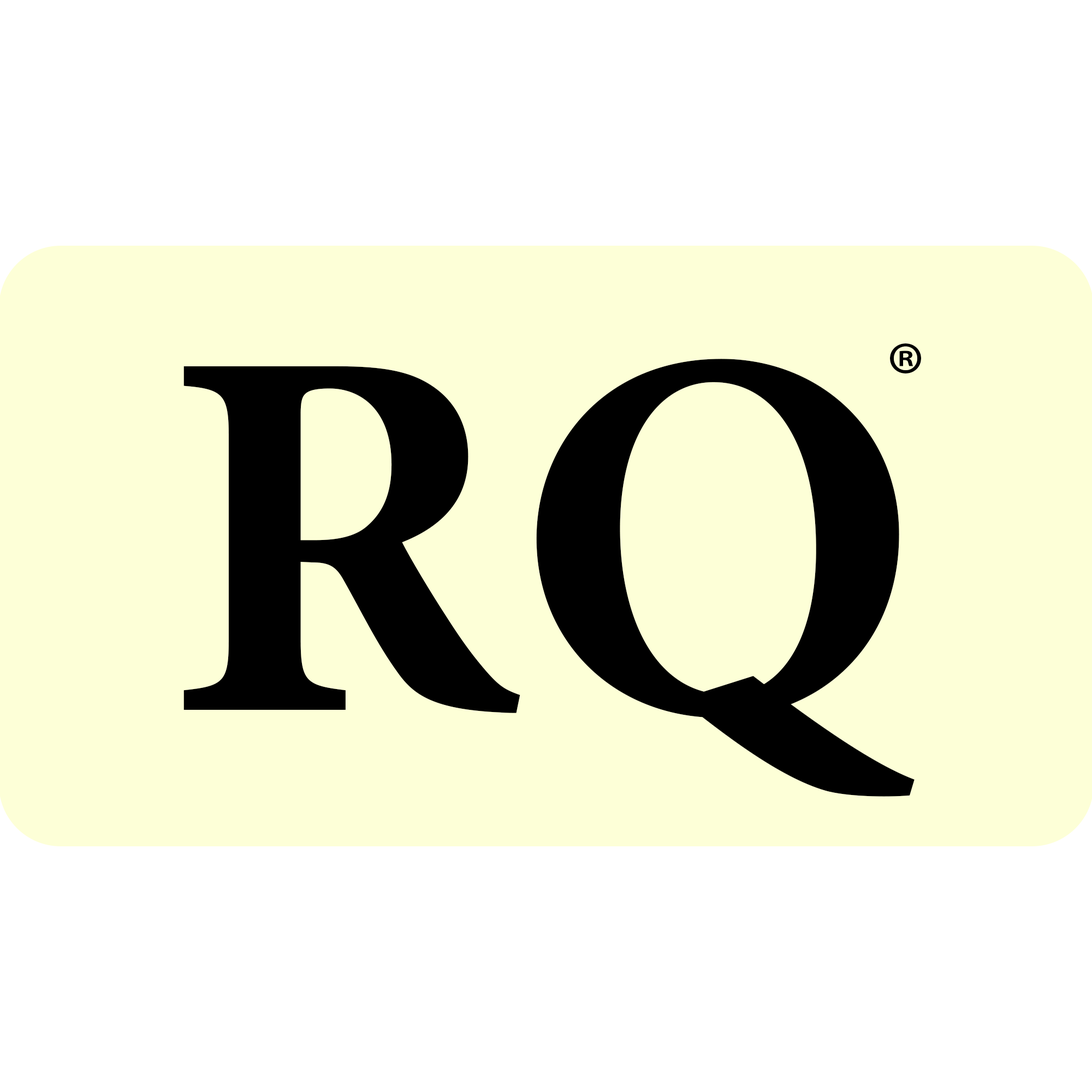
<style>
.page{position:relative;width:1092px;height:1092px;background:#ffffff}
.page>*{position:absolute;margin:0}
.t1{font:91.9px "MyriadPro-Regular";color:#000000}
.t2{font:528.5px "MinionConceptRoman-Bold";color:#000000}
</style>
<div class="page">
<p class="t1" style="left:890px;top:343px;width:31px;height:30px">®</p>
<p class="t2" style="left:183px;top:359px;width:732px;height:438px">RQ</p>
</div>
